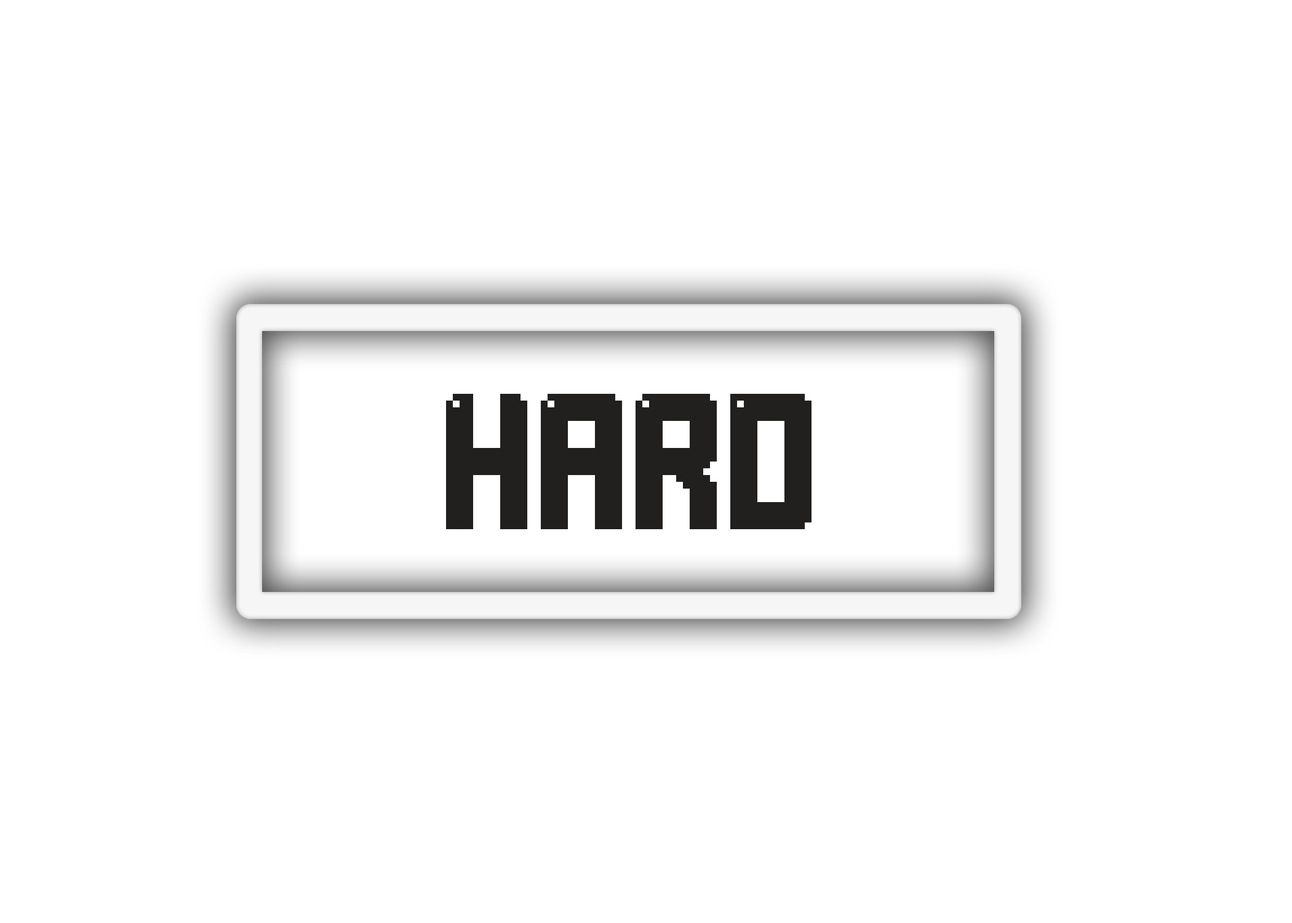
<style>
.page{position:relative;width:1292px;height:923px;background:#ffffff}
.page>*{position:absolute;margin:0}
.t1{font:135.4px "LightPixel-7";color:#22201f}
</style>
<div class="page">
<p class="t1" style="left:446px;top:394px;width:366px;height:135px">HARD</p>
</div>
